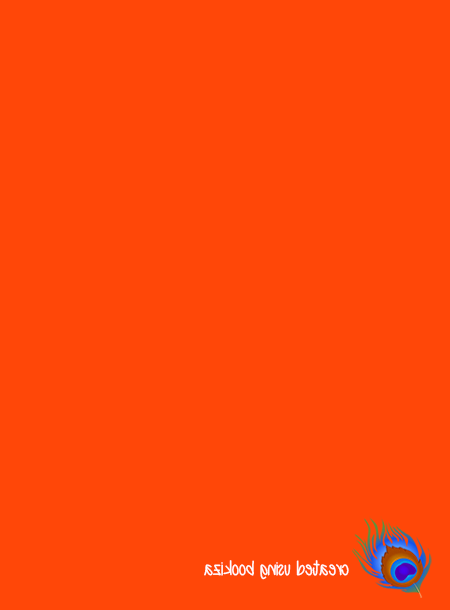
<style>
.page{position:relative;width:450px;height:610px;background:#ff4708}
.page>*{position:absolute;margin:0}
.t1{font:21px "Cutie-Patootie";color:#ffffff}
</style>
<div class="page">
<p class="t1" style="left:204px;top:560px;width:145px;height:20px;rotate:180deg">created using bookiza</p>
</div>
